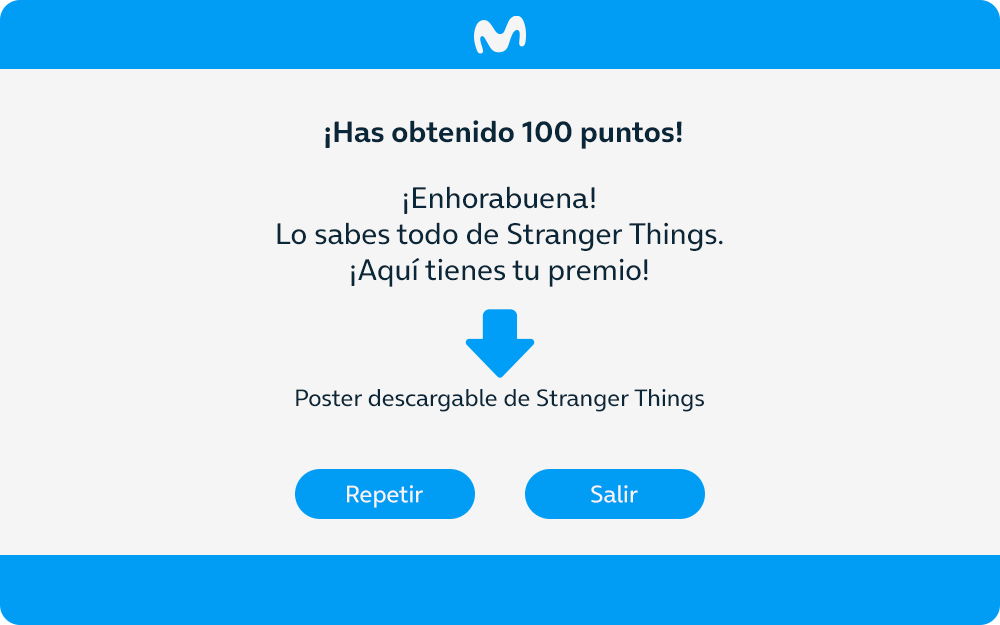
<style>
.page{position:relative;width:1000px;height:625px;background:#f5f5f5}
.page>*{position:absolute;margin:0}
.t1{font:30px "OnAir-Bold";color:#0a2739}
.t2{font:30px "OnAir-Regular";color:#0a2739}
.t3{font:24px "OnAir-Regular";color:#0a2739}
.t4{font:24px "OnAir-Regular";color:#f5f5f5}
</style>
<div class="page">
<p class="t1" style="left:325px;top:120px;width:357px;height:29px">¡Has obtenido 100 puntos!</p>
<p class="t2" style="left:277px;top:186px;width:446px;height:101px;text-align:center">¡Enhorabuena!<br>Lo sabes todo de Stranger Things.<br>¡Aquí tienes tu premio!</p>
<p class="t3" style="left:296px;top:389px;width:408px;height:23px">Poster descargable de Stranger Things</p>
<p class="t4" style="left:347px;top:485px;width:76px;height:23px">Repetir</p>
<p class="t4" style="left:591px;top:485px;width:47px;height:18px">Salir</p>
</div>
